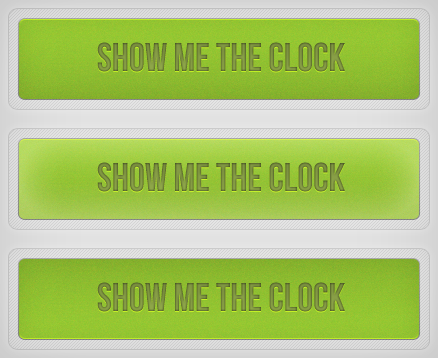
<style>
.page{position:relative;width:438px;height:358px}
.page>*{position:absolute;margin:0}
.t1{font:40px "BebasNeue";color:#778b3d}
</style>
<div class="page">
<p class="t1" style="left:97px;top:42px;width:248px;height:30px">SHOW ME THE CLOCK</p>
<p class="t1" style="left:97px;top:162px;width:248px;height:30px">SHOW ME THE CLOCK</p>
<p class="t1" style="left:97px;top:282px;width:248px;height:30px">SHOW ME THE CLOCK</p>
</div>
